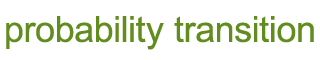
<style>
.page{position:relative;width:320px;height:60px;background:#ffffff}
.page>*{position:absolute;margin:0}
.t1{font:36px "ArialMT";color:#618c1e}
</style>
<div class="page">
<p class="t1" style="left:6px;top:16px;width:308px;height:34px">probability transition</p>
</div>
